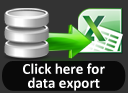
<style>
.page{position:relative;width:128px;height:93px;background:#333333}
.page>*{position:absolute;margin:0}
.t1{font:15px/14px "Calibri-Bold";color:#ffffff}
</style>
<div class="page">
<p class="t1" style="left:23px;top:63px;width:82px;height:28px;text-align:center">Click here for data export</p>
</div>
